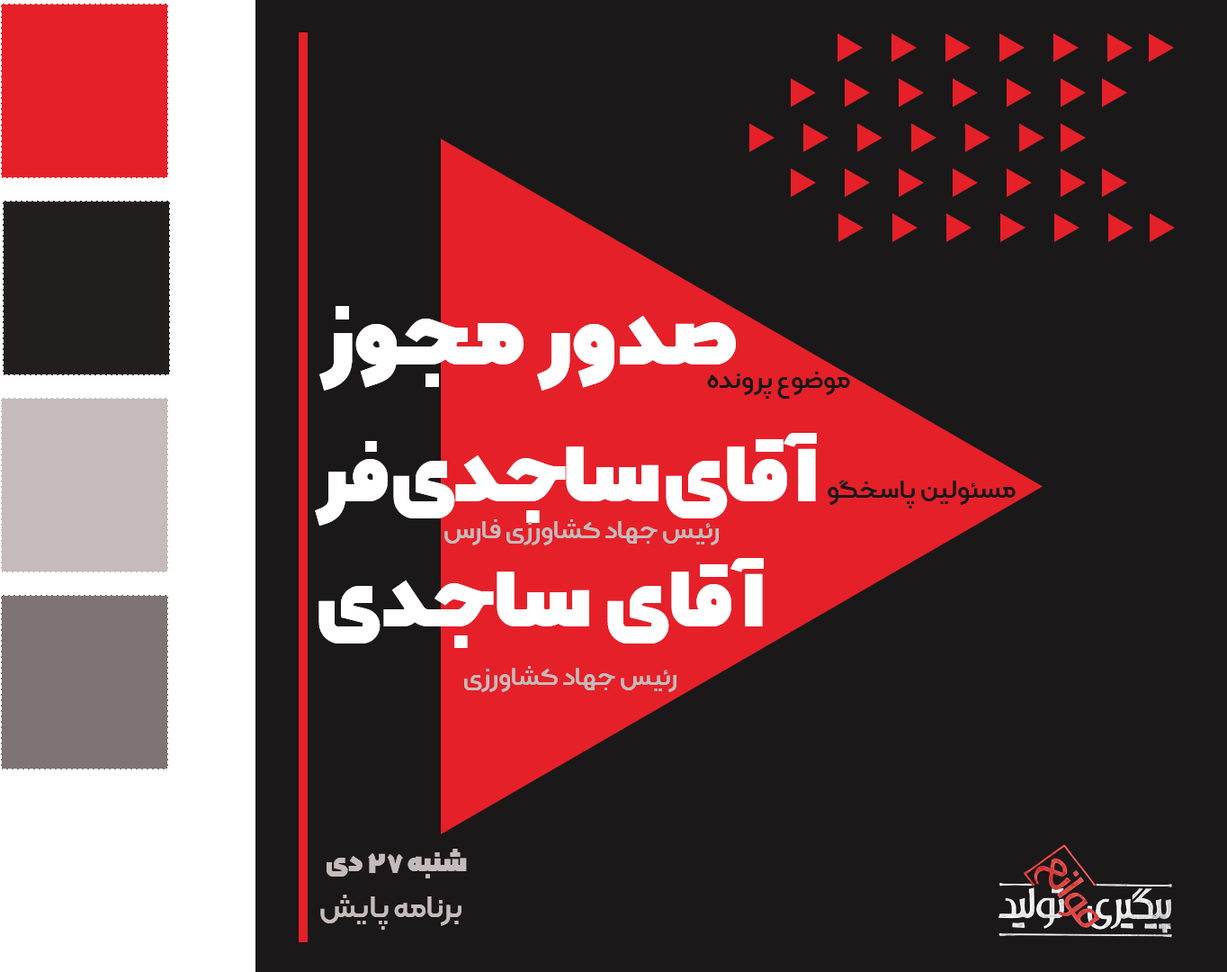
<style>
.page{position:relative;width:1227px;height:972px;background:#1a1818}
.page>*{position:absolute;margin:0}
.t1{font:116.2px "Kalameh-Black";color:#ffffff}
.t2{font:32.4px "Kalameh-Bold";color:#1a1818}
.t3{font:108.9px "Kalameh-Black";letter-spacing:-0.025em;color:#ffffff}
.t4{font:32.4px "Kalameh-Bold";color:#c5bbbb}
.t5{font:108.9px "Kalameh-Black";color:#ffffff}
.t6{font:37.8px "Kalameh-Bold";color:#c5bbbb}
.t7{font:37.8px "Kalameh-Black";color:#c5bbbb}
</style>
<div class="page">
<p class="t1" style="left:319px;top:306px;width:417px;height:84px">صدور مجوز</p>
<p class="t2" style="left:707px;top:372px;width:143px;height:27px">موضوع پرونده</p>
<p class="t3" style="left:315px;top:433px;width:502px;height:93px">آقای ساجدی فر</p>
<p class="t2" style="left:828px;top:480px;width:188px;height:28px">مسئولین پاسخگو</p>
<p class="t4" style="left:444px;top:519px;width:275px;height:26px">رئیس جهاد کشاورزی فارس</p>
<p class="t5" style="left:318px;top:558px;width:446px;height:90px">آقای ساجدی</p>
<p class="t4" style="left:464px;top:666px;width:213px;height:26px">رئیس جهاد کشاورزی</p>
<p class="t6" style="left:320px;top:848px;width:147px;height:81px;text-align:justify"><span class="t7">شنبه 27 دی<br> </span>برنامه پایش</p>
</div>
